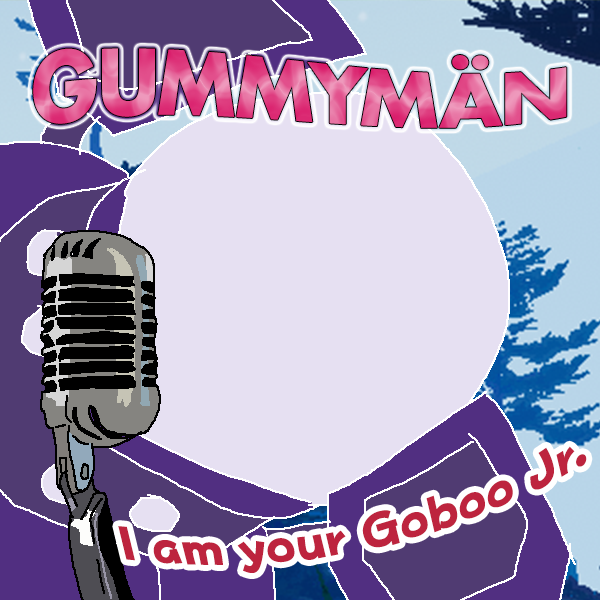
<style>
.page{position:relative;width:600px;height:600px;background:#e6e0f2}
.page>*{position:absolute;margin:0}
.t1{font:80px "Futura-Bold"}
.t2{font:48px "PopHappinessStd-EB";color:#bd243e}
.t3{font:48px "Futura-Bold";color:#bd243e}
</style>
<div class="page">
<p class="t1" style="left:33px;top:48px;width:534px;height:80px">GUMMYMÄN</p>
<p class="t2" style="left:118px;top:446px;width:469px;height:127px;rotate:-12deg">I am your Goboo Jr<span class="t3">.</span></p>
</div>
